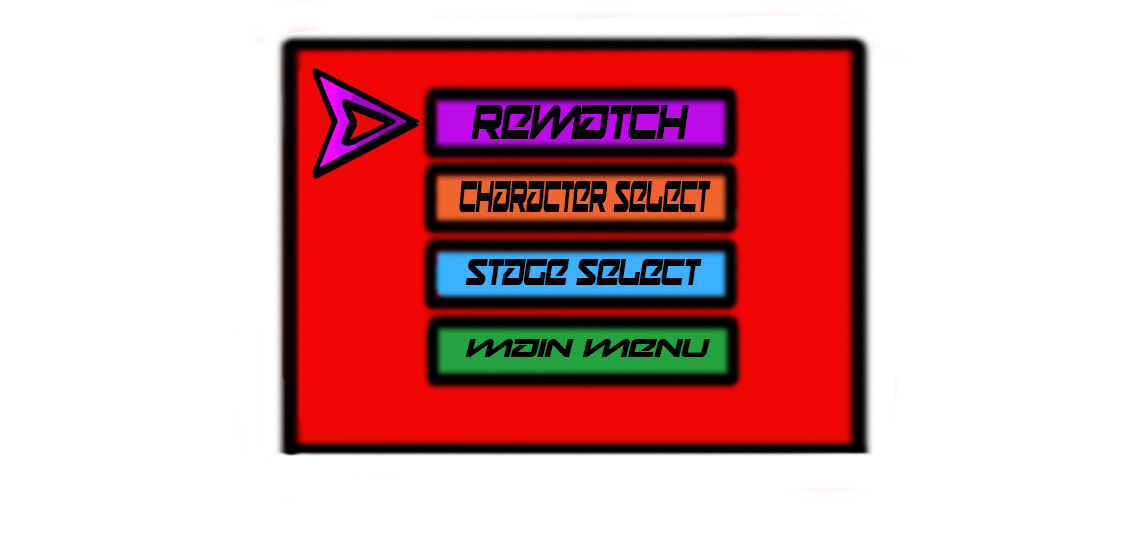
<style>
.page{position:relative;width:1148px;height:535px;background:#ffffff}
.page>*{position:absolute;margin:0}
.t1{font:47.6px "Onky-Italic";color:#000000;scale:0.68 1}
.t2{font:44px "Onky-Italic";color:#000000;scale:0.43 1}
.t3{font:36.3px "Onky-Italic";color:#000000;scale:0.68 1}
.t4{font:26px "Onky-Italic";color:#000000;scale:1.16 1}
</style>
<div class="page">
<p class="t1" style="left:471px;top:105px;width:218px;height:34px">Rematch</p>
<p class="t2" style="left:459px;top:181px;width:252px;height:31px">Character Select</p>
<p class="t3" style="left:465px;top:259px;width:237px;height:26px">Stage Select</p>
<p class="t4" style="left:465px;top:339px;width:246px;height:18px">Main Menu</p>
</div>
